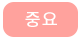
<style>
.page{position:relative;width:80px;height:40px;background:#ffa29d}
.page>*{position:absolute;margin:0}
.t1{font:17.5px "NotoSansKR-Medium";letter-spacing:0.05em;color:#fffffe}
</style>
<div class="page">
<p class="t1" style="left:25px;top:12px;width:32px;height:15px">중요</p>
</div>
